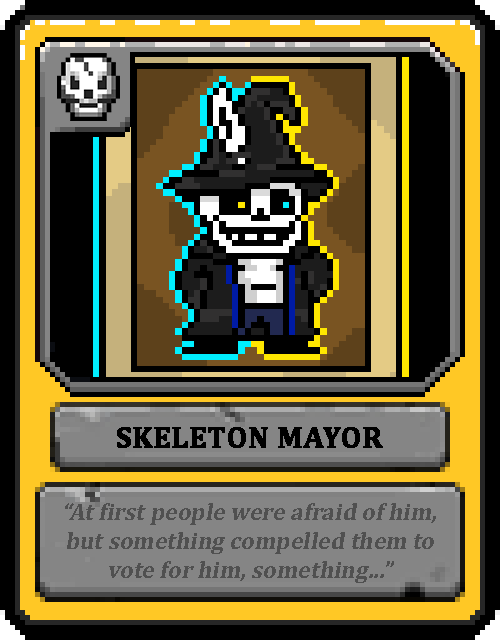
<style>
.page{position:relative;width:500px;height:640px;background:#000000}
.page>*{position:absolute;margin:0}
.t1{font:30px "Cambria-Bold";color:#000000;text-transform:uppercase;font-weight:bold}
.t2{font:24px "Cambria-Bold";color:#505050;font-style:italic}
</style>
<div class="page">
<p class="t1" style="left:117px;top:427px;width:266px;height:21px">Skeleton Mayor</p>
<p class="t2" style="left:65px;top:503px;width:371px;height:80px;text-align:center">“At first people were afraid of him, but something compelled them to vote for him, something...”</p>
</div>
